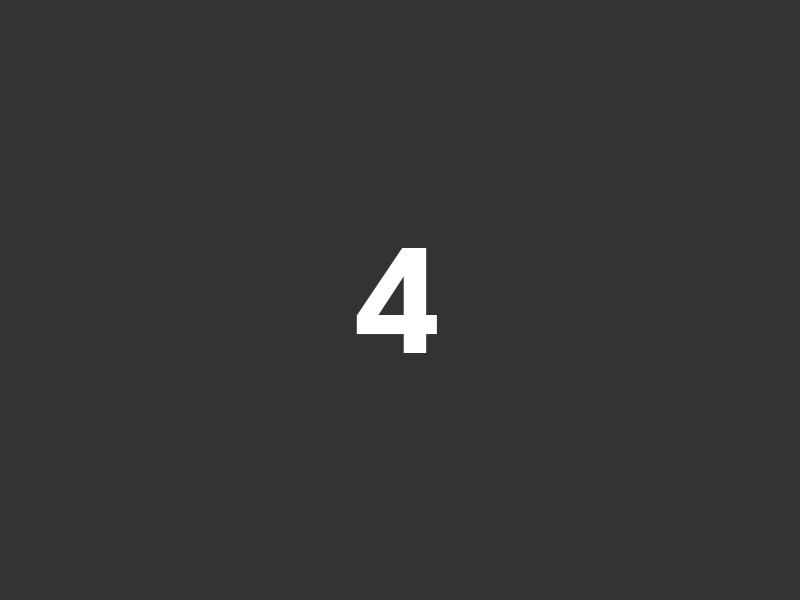
<style>
.page{position:relative;width:800px;height:600px;background:#333333}
.page>*{position:absolute;margin:0}
.t1{font:166.7px "Effra-Bold";color:#ffffff}
</style>
<div class="page">
<p class="t1" style="left:356px;top:248px;width:81px;height:105px">4</p>
</div>
